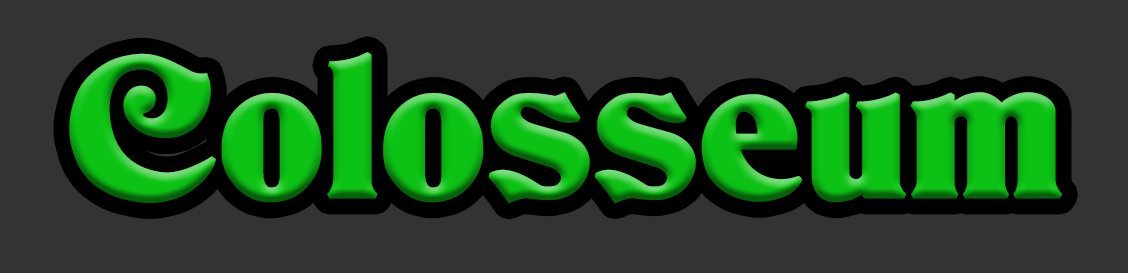
<style>
.page{position:relative;width:1128px;height:273px;background:#333333}
.page>*{position:absolute;margin:0}
.t1{font:186.8px "Deneane";letter-spacing:-0.01em;font-weight:bold;scale:1.04 1}
</style>
<div class="page">
<p class="t1" style="left:69px;top:52px;width:993px;height:152px">Colosseum</p>
</div>
